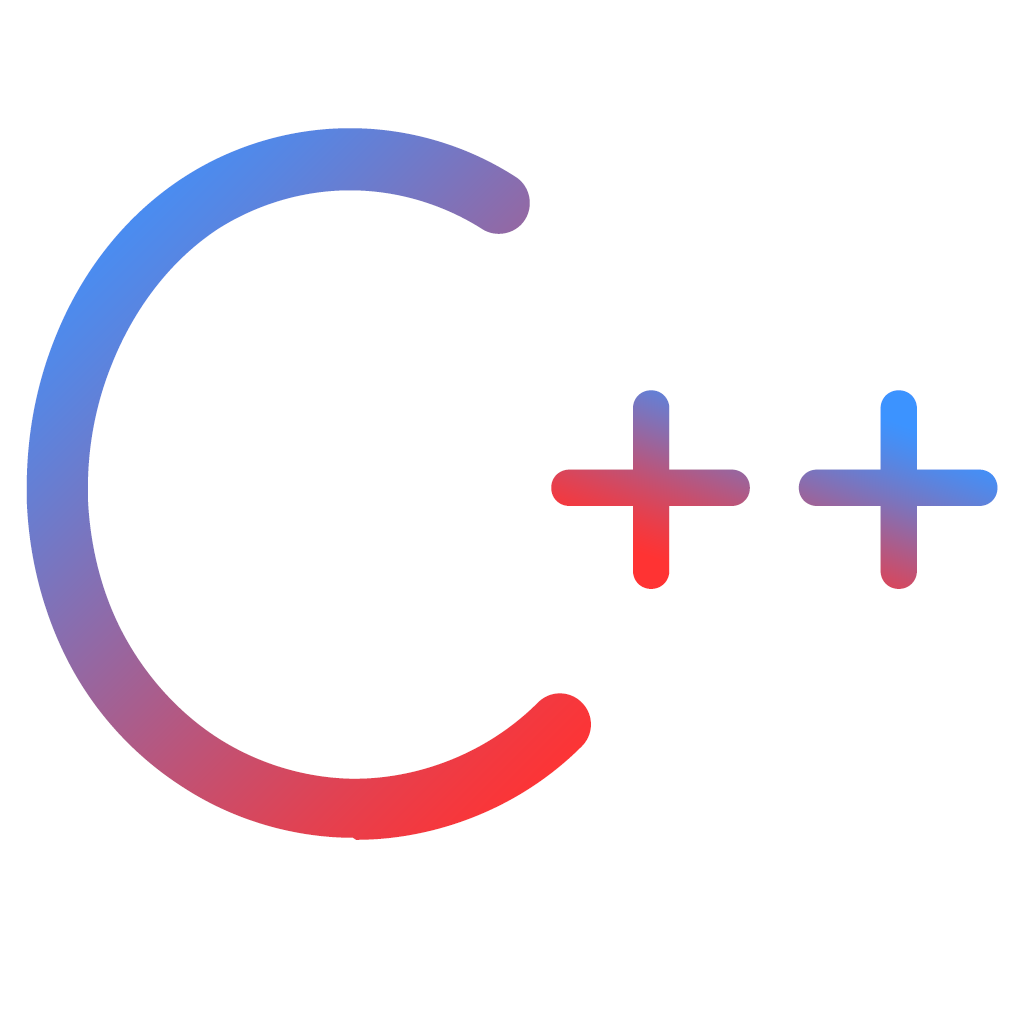
<style>
.page{position:relative;width:1024px;height:1024px;background:#ffffff}
.page>*{position:absolute;margin:0}
.t1{font:1016.3px "Beon-Medium"}
.t2{font:605.4px "Beon-Medium"}
</style>
<div class="page">
<p class="t1" style="left:26px;top:128px;width:565px;height:712px">c</p>
<p class="t2" style="left:551px;top:390px;width:447px;height:199px">++</p>
</div>
